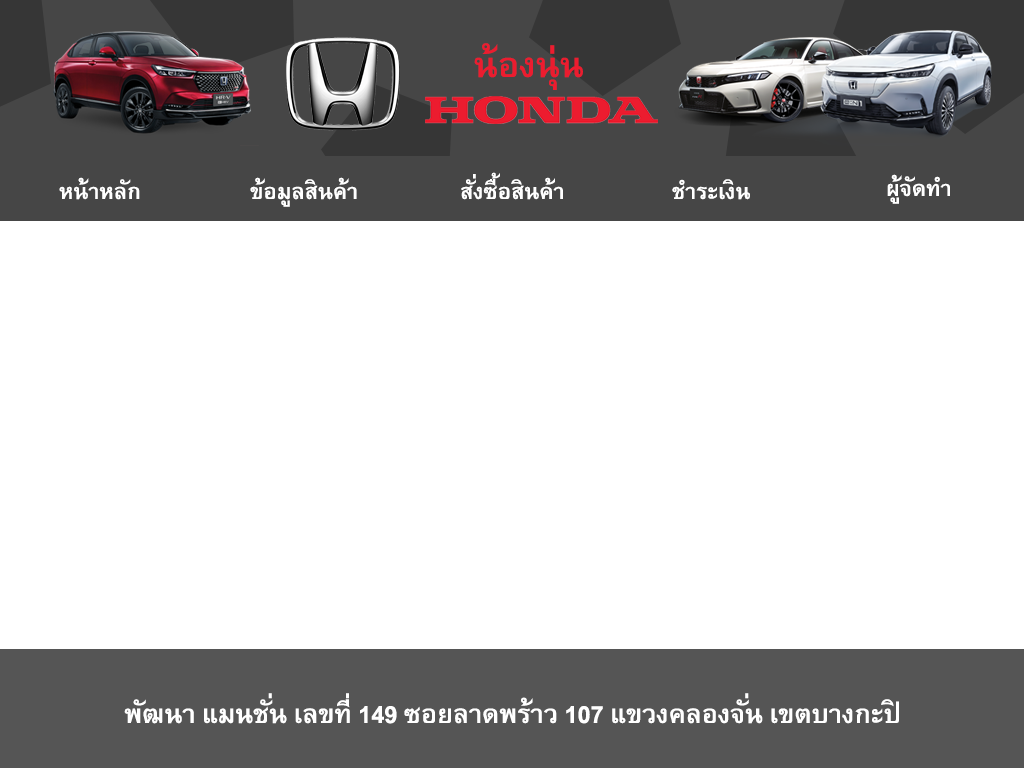
<style>
.page{position:relative;width:1024px;height:768px;background:#ffffff}
.page>*{position:absolute;margin:0}
.t1{font:48px "BrowalliaNew-Bold";color:#ec1c2f}
.t2{font:30px "BrowalliaUPC-Bold";color:#ffffff}
.t3{font:36px "BrowalliaNew-Bold";color:#ffffff}
</style>
<div class="page">
<p class="t1" style="left:474px;top:43px;width:109px;height:47px">น้องนุ่น</p>
<p class="t2" style="left:461px;top:172px;width:102px;height:28px">สั่งซื้อสินค้า</p>
<p class="t2" style="left:887px;top:174px;width:63px;height:30px">ผู้จัดทำ</p>
<p class="t2" style="left:59px;top:177px;width:81px;height:23px">หน้าหลัก</p>
<p class="t2" style="left:250px;top:177px;width:107px;height:30px">ข้อมูลสินค้า</p>
<p class="t2" style="left:672px;top:179px;width:78px;height:21px">ชำระเงิน</p>
<p class="t3" style="left:124px;top:693px;width:775px;height:31px">พัฒนา แมนชั่น เลขที่ 149 ซอยลาดพร้าว 107 แขวงคลองจั่น เขตบางกะปิ</p>
</div>
